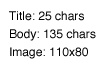
<style>
.page{position:relative;width:110px;height:80px;background:#ffffff}
.page>*{position:absolute;margin:0}
.t1{font:12px/18px "Helvetica";color:#000000}
</style>
<div class="page">
<p class="t1" style="left:9px;top:11px;width:87px;height:48px">Title: 25 chars<br>Body: 135 chars<br>Image: 110x80</p>
</div>
